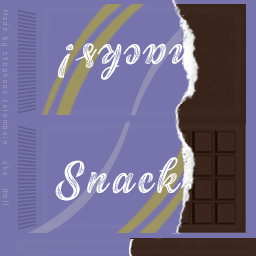
<style>
.page{position:relative;width:256px;height:256px;background:#7774ad}
.page>*{position:absolute;margin:0}
.t1{font:12px "CWebSmall";letter-spacing:0.05em;color:#918fb4}
.t2{font:95.4px "BlackScript-PrintedInline";letter-spacing:0.05em;color:#ffffff}
</style>
<div class="page">
<p class="t1" style="left:1px;top:10px;width:8px;height:195px;rotate:90deg">Made by stephane colombain    aka   Well</p>
<p class="t2" style="left:58px;top:36px;width:164px;height:44px;rotate:180deg">Snacks!</p>
<p class="t2" style="left:55px;top:157px;width:166px;height:44px">Snacks!</p>
</div>
